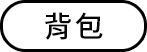
<style>
.page{position:relative;width:147px;height:52px;background:#ffffff}
.page>*{position:absolute;margin:0}
.t1{font:29.2px "NotoSansCJKtc-Medium";letter-spacing:0.06em;color:#060606}
</style>
<div class="page">
<p class="t1" style="left:45px;top:12px;width:58px;height:28px">背包</p>
</div>
